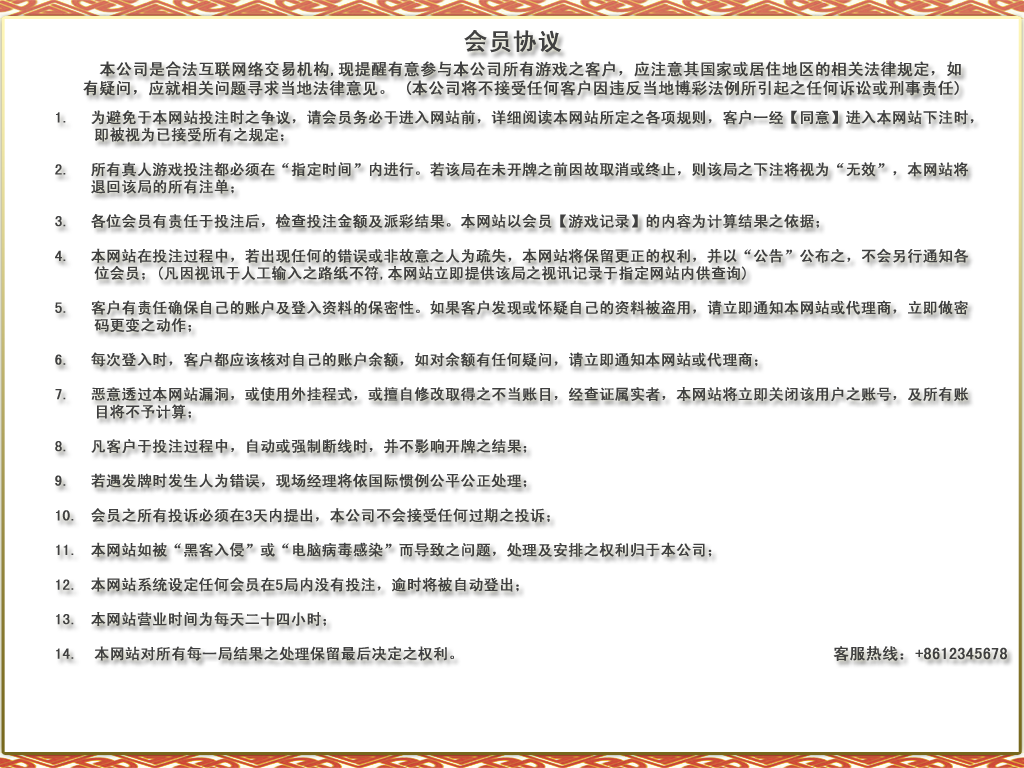
<style>
.page{position:relative;width:1024px;height:768px;background:#ffffff}
.page>*{position:absolute;margin:0}
.t1{font:24px "SimHei";color:#414141;font-weight:bold}
.t2{font:16px "SimHei";color:#404040;font-weight:bold}
.t3{font:15px "SimHei";color:#404040;font-weight:bold}
</style>
<div class="page">
<p class="t1" style="left:464px;top:30px;width:97px;height:23px">会员协议</p>
<p class="t2" style="left:83px;top:61px;width:878px;height:35px">本公司是合法互联网络交易机构,现提醒有意参与本公司所有游戏之客户，应注意其国家或居住地区的相关法律规定，如<br>有疑问，应就相关问题寻求当地法律意见。 (本公司将不接受任何客户因违反当地博彩法例所引起之任何诉讼或刑事责任)</p>
<p class="t3" style="left:55px;top:110px;width:919px;height:551px">1. 为避免于本网站投注时之争议，请会员务必于进入网站前，详细阅读本网站所定之各项规则，客户一经【同意】进入本网站下注时，<br>     即被视为已接受所有之规定；<br><br>2. 所有真人游戏投注都必须在“指定时间”内进行。若该局在未开牌之前因故取消或终止，则该局之下注将视为“无效”，本网站将<br> 退回该局的所有注单；<br><br>3. 各位会员有责任于投注后，检查投注金额及派彩结果。本网站以会员【游戏记录】的内容为计算结果之依据；<br><br>4.  本网站在投注过程中，若出现任何的错误或非故意之人为疏失，本网站将保留更正的权利，并以“公告”公布之，不会另行通知各<br>     位会员；(凡因视讯于人工输入之路纸不符,本网站立即提供该局之视讯记录于指定网站内供查询)<br><br>5. 客户有责任确保自己的账户及登入资料的保密性。如果客户发现或怀疑自己的资料被盗用，请立即通知本网站或代理商，立即做密<br>     码更变之动作；<br><br>6. 每次登入时，客户都应该核对自己的账户余额，如对余额有任何疑问，请立即通知本网站或代理商；<br><br>7. 恶意透过本网站漏洞，或使用外挂程式，或擅自修改取得之不当账目，经查证属实者，本网站将立即关闭该用户之账号，及所有账<br>     目将不予计算；<br><br>8. 凡客户于投注过程中，自动或强制断线时，并不影响开牌之结果；<br><br>9. 若遇发牌时发生人为错误，现场经理将依国际惯例公平公正处理；<br><br>10. 会员之所有投诉必须在3天内提出，本公司不会接受任何过期之投诉；<br><br>11. 本网站如被“黑客入侵”或“电脑病毒感染”而导致之问题，处理及安排之权利归于本公司；<br><br>12. 本网站系统设定任何会员在5局内没有投注，逾时将被自动登出；<br><br>13. 本网站营业时间为每天二十四小时；<br><br>14.  本网站对所有每一局结果之处理保留最后决定之权利。</p>
<p class="t2" style="left:833px;top:646px;width:174px;height:15px">客服热线：+8612345678</p>
</div>
